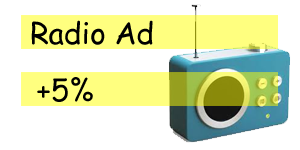
<style>
.page{position:relative;width:300px;height:150px;background:#ffffff}
.page>*{position:absolute;margin:0}
.t1{font:29.9px "ComicSansMS";color:#000000}
</style>
<div class="page">
<p class="t1" style="left:31px;top:20px;width:122px;height:25px">Radio Ad</p>
<p class="t1" style="left:37px;top:77px;width:56px;height:25px">+5%</p>
</div>
